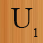
<style>
.page{position:relative;width:43px;height:43px}
.page>*{position:absolute;margin:0}
.t1{font:30px "TimesNewRomanPSMT";color:#0c0c0b}
.t2{font:12px "TimesNewRomanPSMT";color:#0c0c0b}
</style>
<div class="page">
<p class="t1" style="left:11px;top:8px;width:22px;height:20px">U</p>
<p class="t2" style="left:34px;top:28px;width:4px;height:9px">1</p>
</div>
